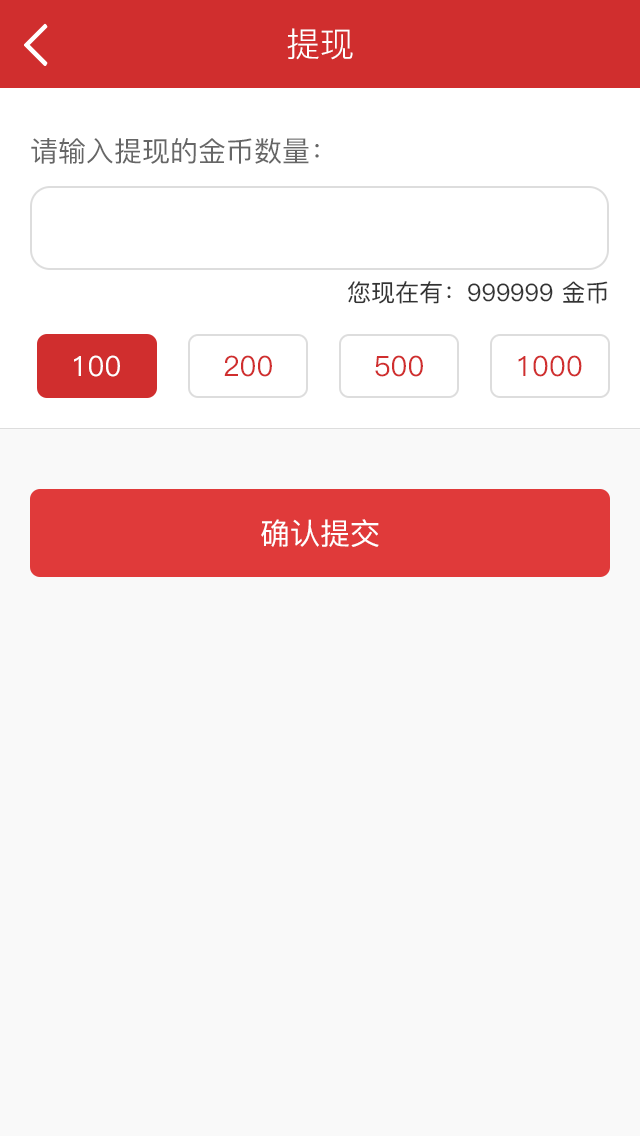
<style>
.page{position:relative;width:640px;height:1136px;background:#f9f9f9}
.page>*{position:absolute;margin:0}
.t1{font:34px "PingFang-SC-Regular";color:#ffffff}
.t2{font:28px "PingFang-SC-Medium";color:#666666}
.t3{font:24px "PingFang-SC-Medium";color:#333333}
.t4{font:28px "PingFang-SC-Medium";color:#ffffff}
.t5{font:28px "PingFang-SC-Medium";color:#d02e2e}
.t6{font:30px "PingFang-SC-Medium";color:#ffffff}
</style>
<div class="page">
<p class="t1" style="left:287px;top:28px;width:66px;height:32px">提现</p>
<p class="t2" style="left:31px;top:138px;width:288px;height:26px">请输入提现的金币数量：</p>
<p class="t3" style="left:348px;top:281px;width:260px;height:23px">您现在有：999999 金币</p>
<p class="t4" style="left:74px;top:355px;width:46px;height:22px">100</p>
<p class="t5" style="left:224px;top:355px;width:48px;height:22px">200</p>
<p class="t5" style="left:375px;top:355px;width:48px;height:22px">500</p>
<p class="t5" style="left:518px;top:355px;width:64px;height:22px">1000</p>
<p class="t6" style="left:261px;top:519px;width:118px;height:28px">确认提交</p>
</div>
